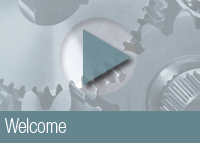
<style>
.page{position:relative;width:200px;height:143px;background:#65858f}
.page>*{position:absolute;margin:0}
.t1{font:19.8px "HelveticaNeueLTPro-ThCn";color:#fefefe}
</style>
<div class="page">
<p class="t1" style="left:5px;top:118px;width:61px;height:15px">Welcome</p>
</div>
